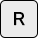
<style>
.page{position:relative;width:38px;height:38px;background:#ebebeb}
.page>*{position:absolute;margin:0}
.t1{font:16.7px "RodinNTLGPro-DB";color:#000000}
</style>
<div class="page">
<p class="t1" style="left:14px;top:12px;width:11px;height:14px">R</p>
</div>
